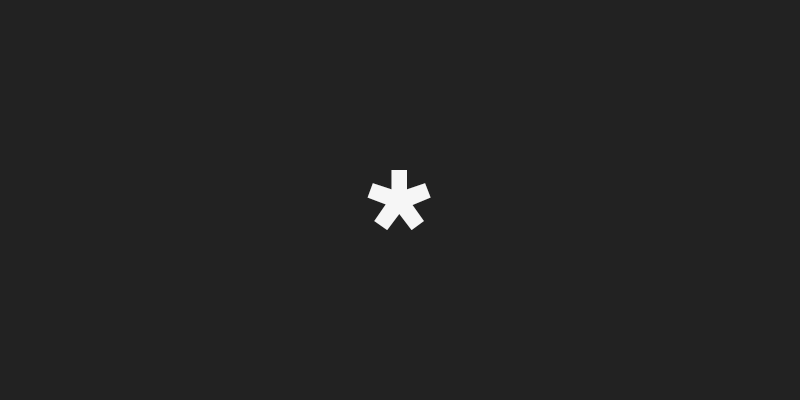
<style>
.page{position:relative;width:800px;height:400px;background:#222222}
.page>*{position:absolute;margin:0}
.t1{font:250px "Impact";color:#f6f6f6}
</style>
<div class="page">
<p class="t1" style="left:367px;top:170px;width:64px;height:60px">*</p>
</div>
